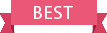
<style>
.page{position:relative;width:107px;height:33px;background:#eb5777}
.page>*{position:absolute;margin:0}
.t1{font:18.5px "MyriadPro-Regular";letter-spacing:0.05em;color:#ffffff;text-transform:uppercase}
</style>
<div class="page">
<p class="t1" style="left:34px;top:6px;width:39px;height:13px">best</p>
</div>
